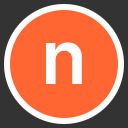
<style>
.page{position:relative;width:128px;height:128px;background:#ff6632}
.page>*{position:absolute;margin:0}
.t1{font:75px "Inter-SemiBold";color:#ffffff}
</style>
<div class="page">
<p class="t1" style="left:46px;top:42px;width:36px;height:42px">n</p>
</div>
